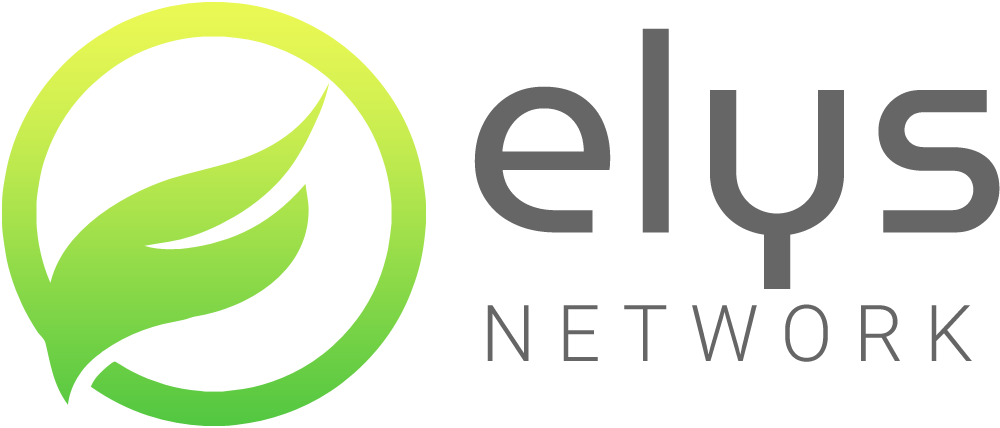
<style>
.page{position:relative;width:1000px;height:428px;background:#ffffff}
.page>*{position:absolute;margin:0}
.t1{font:278.8px "MuseoModerno-Regular";color:#666666}
.t2{font:78.3px "Roboto-Light";letter-spacing:0.28em;color:#666666}
</style>
<div class="page">
<p class="t1" style="left:474px;top:28px;width:526px;height:261px">elys</p>
<p class="t2" style="left:487px;top:304px;width:485px;height:58px">NETWORK</p>
</div>
